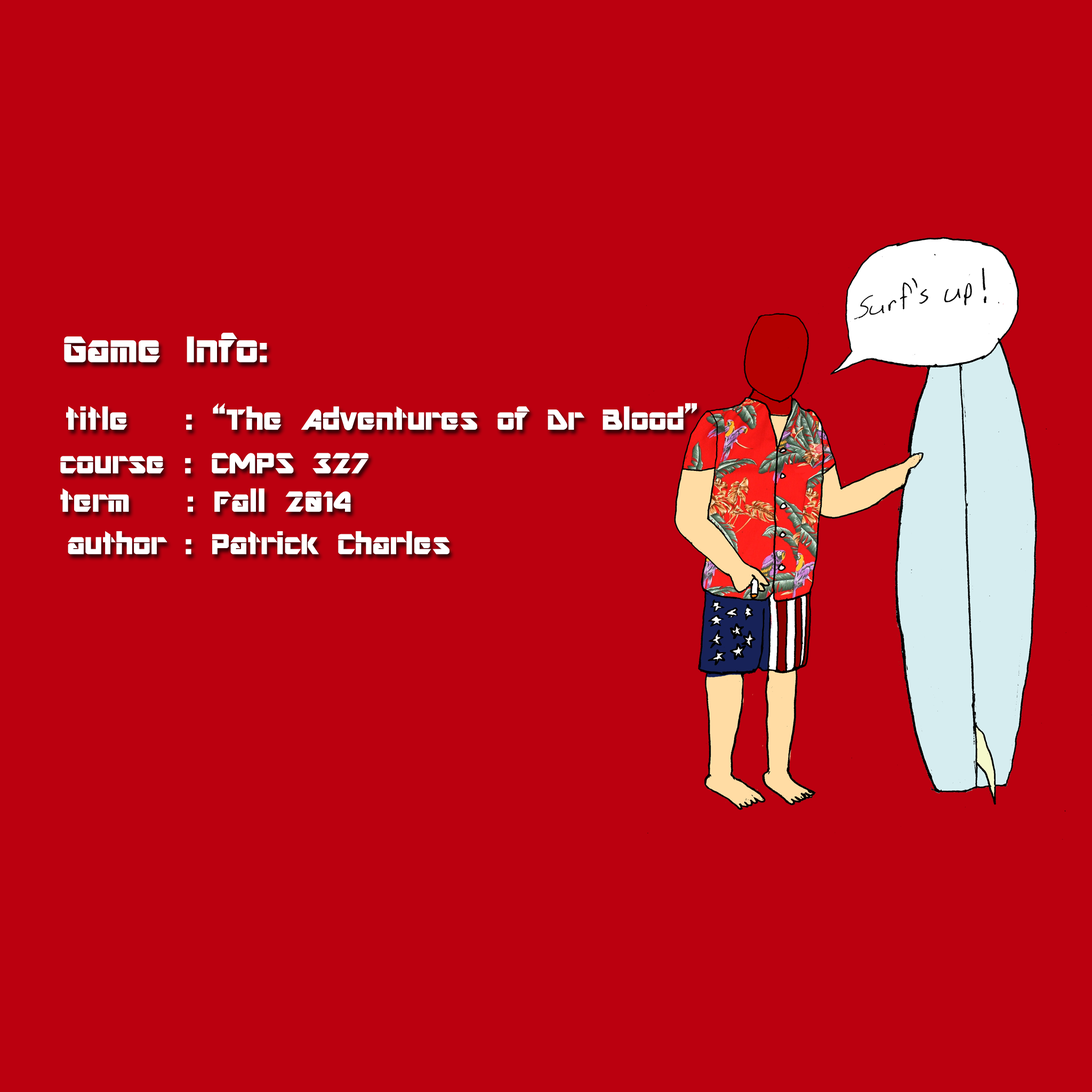
<style>
.page{position:relative;width:1092px;height:1092px;background:#bb000f}
.page>*{position:absolute;margin:0}
.t1{font:40.5px "ARDESTINE";color:#ffffff;scale:1.04 1}
.t2{font:32px "ARDESTINE";color:#ffffff;scale:1.04 1}
.t3{font:31.5px "ARDESTINE";color:#ffffff;scale:1.04 1}
</style>
<div class="page">
<p class="t1" style="left:64px;top:333px;width:203px;height:30px">Game Info:</p>
<p class="t2" style="left:66px;top:403px;width:631px;height:27px">title   : “The Adventures of Dr Blood”</p>
<p class="t2" style="left:60px;top:453px;width:308px;height:59px">course : CMPS 327<br>term   : Fall 2014</p>
<p class="t3" style="left:68px;top:531px;width:381px;height:24px">author : Patrick Charles</p>
</div>
